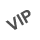
<style>
.page{position:relative;width:40px;height:40px;background:#ffffff}
.page>*{position:absolute;margin:0}
.t1{font:16.6px "Arial-BoldMT";color:#505050}
</style>
<div class="page">
<p class="t1" style="left:5px;top:10px;width:26px;height:20px;rotate:-29deg">VIP</p>
</div>
